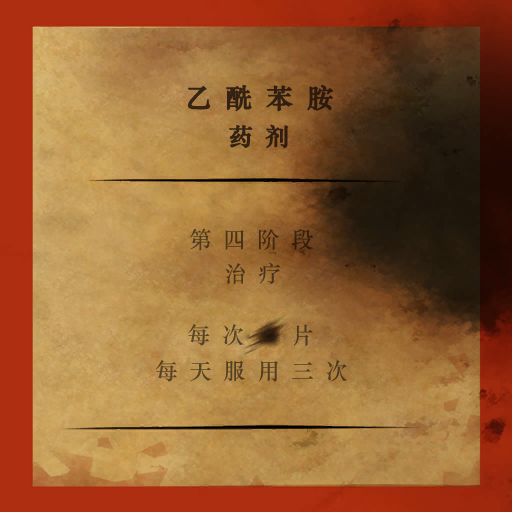
<style>
.page{position:relative;width:512px;height:512px}
.page>*{position:absolute;margin:0}
.t1{font:26.7px/40px "STZhongsong";letter-spacing:0.5em;color:#332012;font-weight:bold}
.t2{font:24px/40px "STZhongsong";letter-spacing:0.5em;color:#332012;font-weight:bold}
.t3{font:22.7px/36px "STZhongsong";letter-spacing:0.5em;color:#493218}
.t4{font:22.7px/36px "SourceHanSansSC-Normal";letter-spacing:0.5em;color:#493218}
.t5{font:22.7px/36px "STZhongsong";letter-spacing:0.5em;color:#544123}
</style>
<div class="page">
<p class="t1" style="left:188px;top:84px;width:145px;height:65px;text-align:center">乙酰苯胺<br><span class="t2">药剂</span></p>
<p class="t3" style="left:190px;top:228px;width:124px;height:57px;text-align:center"><span class="t4"> </span>第四阶段<br> 治疗</p>
<p class="t5" style="left:156px;top:324px;width:191px;height:58px;text-align:center">每次  片<br>每天服用三次</p>
</div>
